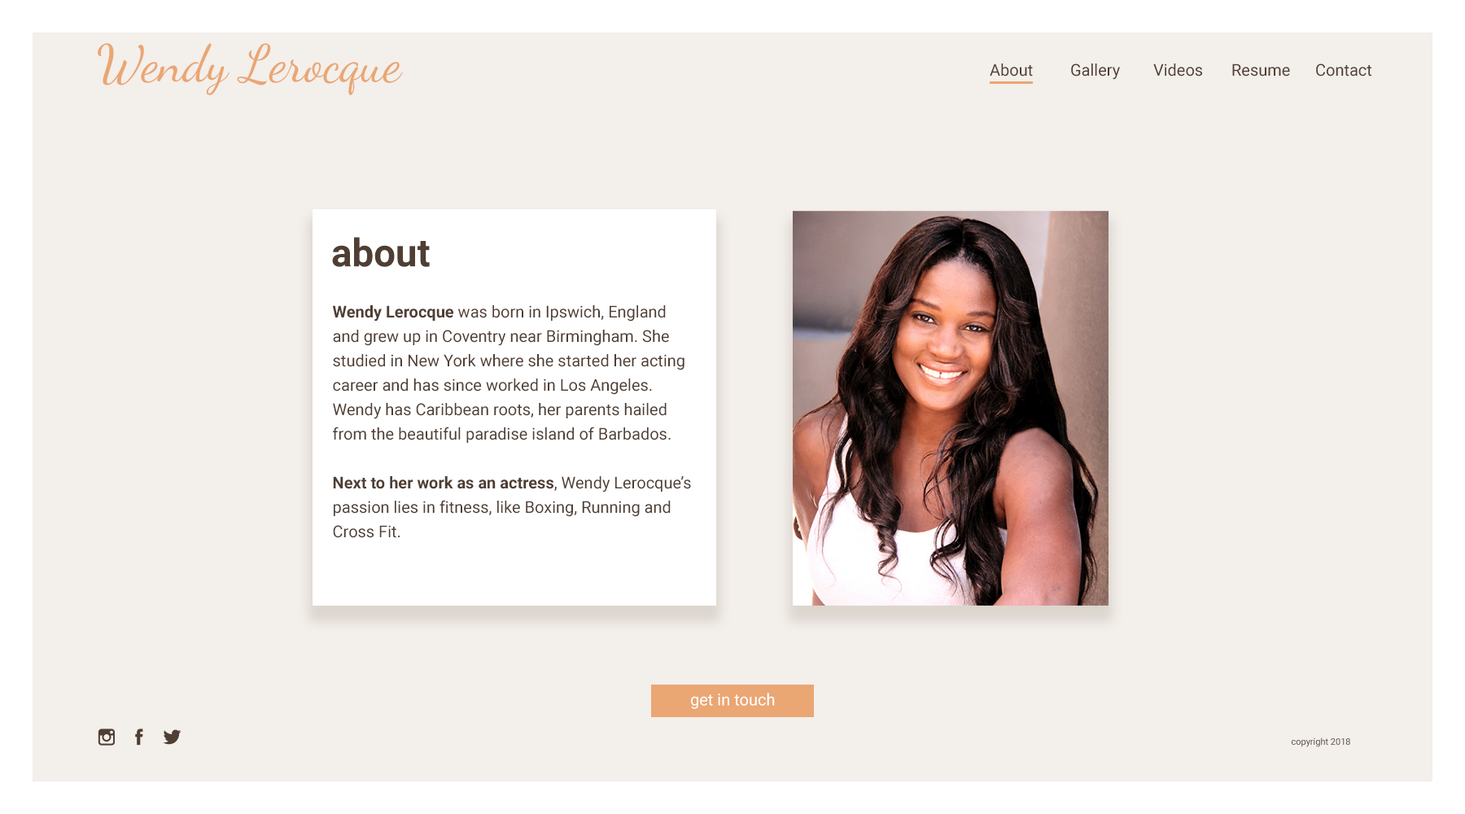
<style>
.page{position:relative;width:1465px;height:814px;background:#f3efeb}
.page>*{position:absolute;margin:0}
.t1{font:51.7px "DancingScript-Regular";color:#eaa673}
.t2{font:16.3px "Roboto-Regular";color:#4f3e33}
.t3{font:38.7px "Roboto-Bold";color:#4f3e33}
.t4{font:16.3px/24.4px "Roboto-Regular";color:#4f3e33}
.t5{font:16.3px/24.4px "Roboto-Bold";color:#4f3e33}
.t6{font:16.3px "Roboto-Regular";color:#ffffff}
.t7{font:9px "Roboto-Regular";color:#4f3e33}
</style>
<div class="page">
<p class="t1" style="left:98px;top:43px;width:305px;height:52px">Wendy Lerocque</p>
<p class="t2" style="left:990px;top:63px;width:43px;height:14px">About</p>
<p class="t2" style="left:1071px;top:63px;width:49px;height:17px">Gallery</p>
<p class="t2" style="left:1153px;top:63px;width:49px;height:14px">Videos</p>
<p class="t2" style="left:1232px;top:63px;width:58px;height:14px">Resume</p>
<p class="t2" style="left:1316px;top:63px;width:55px;height:14px">Contact</p>
<p class="t3" style="left:332px;top:237px;width:98px;height:30px">about</p>
<p class="t4" style="left:332px;top:305px;width:359px;height:233px"><span class="t5">Wendy Lerocque</span> was born in Ipswich, England and grew up in Coventry near Birmingham. She studied in New York where she started her acting career and has since worked in Los Angeles. <br>Wendy has Caribbean roots, her parents hailed from the beautiful paradise island of Barbados. <br><br><span class="t5">Next to her work as an actress</span>, Wendy Lerocque’s passion lies in fitness, like Boxing, Running and Cross Fit.</p>
<p class="t6" style="left:691px;top:693px;width:84px;height:16px">get in touch</p>
<p class="t7" style="left:1292px;top:737px;width:58px;height:10px">copyright 2018</p>
</div>
